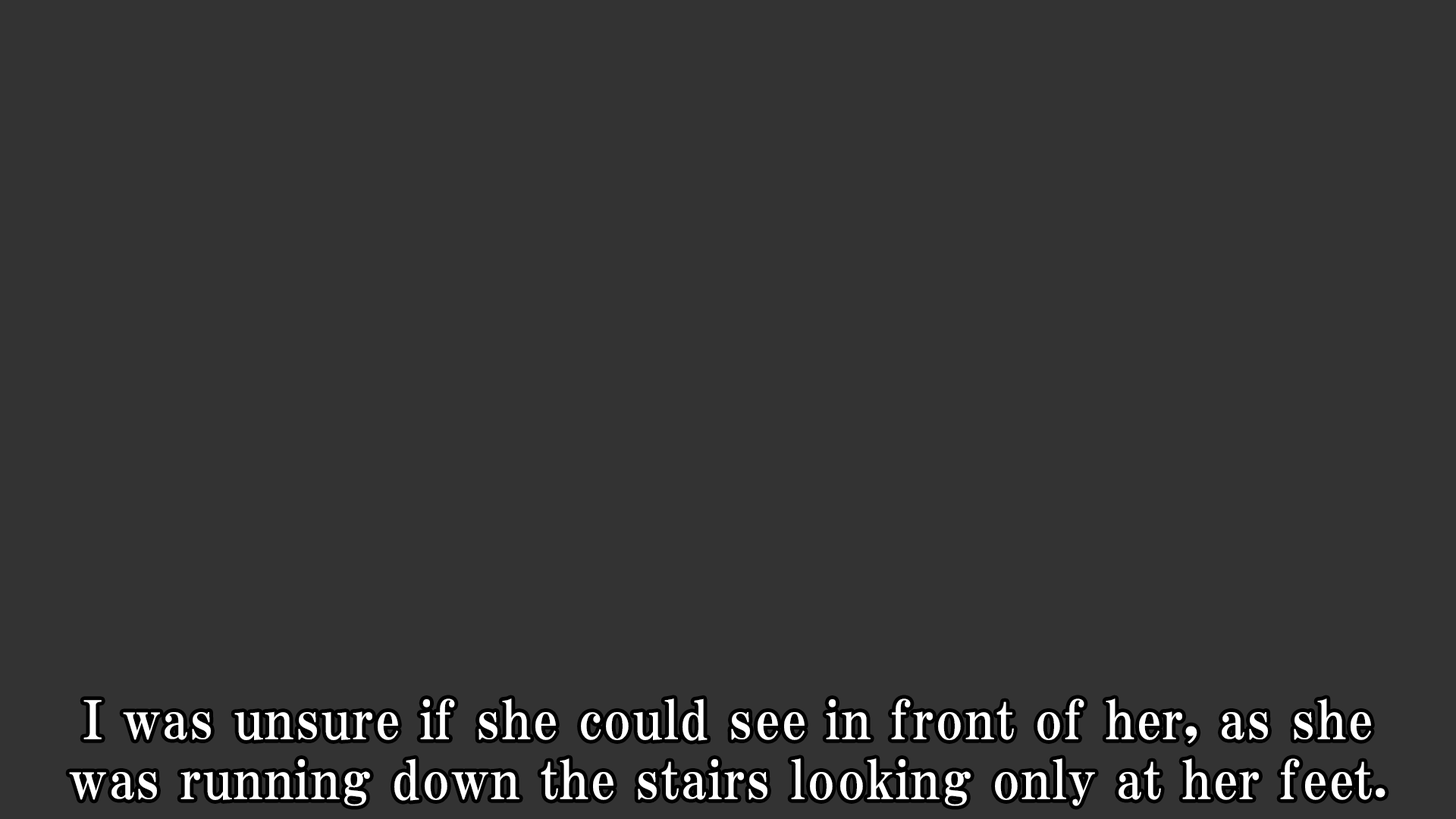
<style>
.page{position:relative;width:1456px;height:819px;background:#333333}
.page>*{position:absolute;margin:0}
.t1{font:53.1px/59.9px "HGPMinchoE";letter-spacing:0.025em;color:#ffffff}
</style>
<div class="page">
<p class="t1" style="left:69px;top:698px;width:1316px;height:108px;text-align:center">I was unsure if she could see in front of her, as she<br>was running down the stairs looking only at her feet.</p>
</div>
